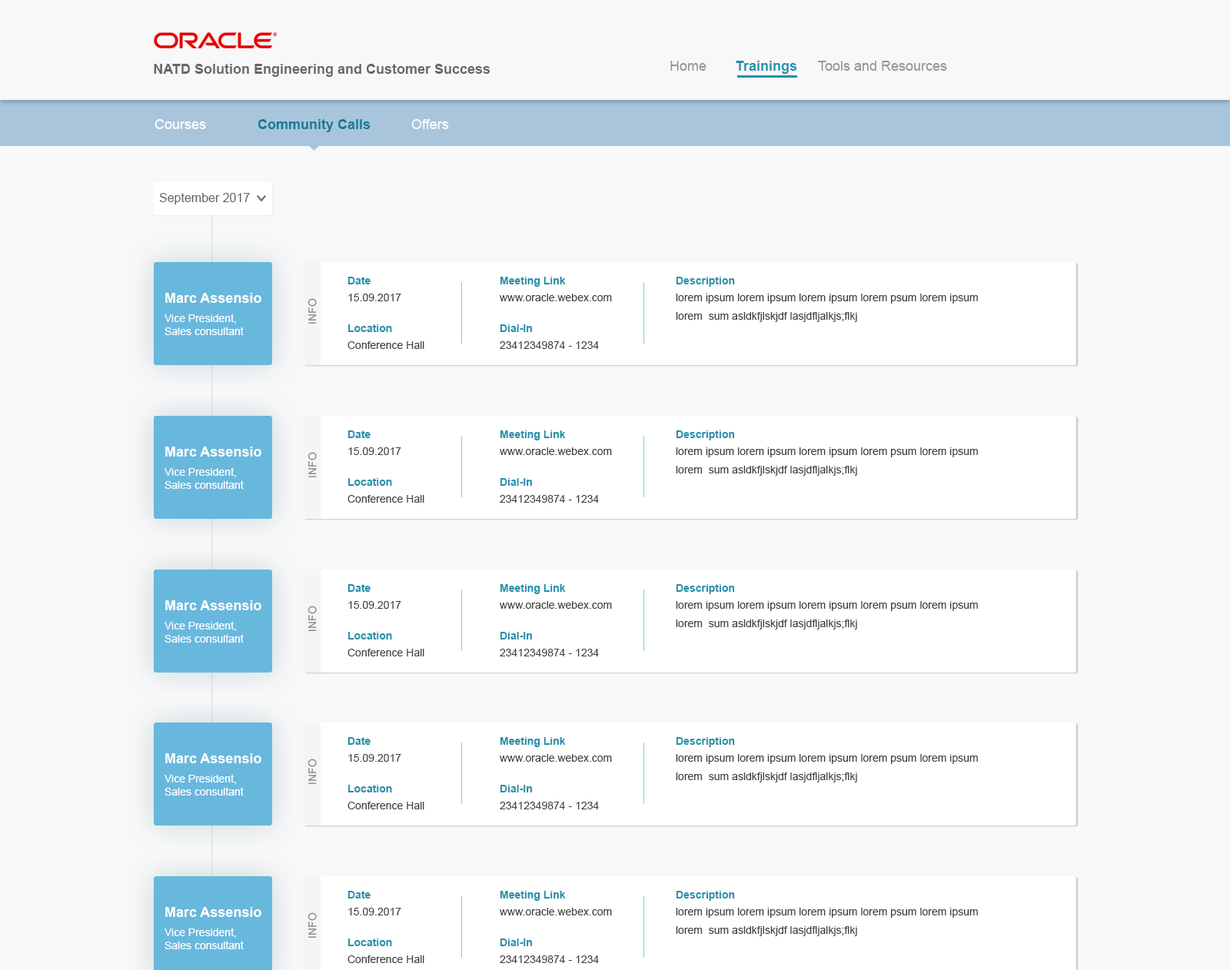
<style>
.page{position:relative;width:1230px;height:970px;background:#f8f8f8}
.page>*{position:absolute;margin:0}
.t1{font:13.8px "Arial-BoldMT";color:#666666}
.t2{font:13.8px "ArialMT";color:#969696}
.t3{font:13.8px "Arial-BoldMT";color:#2290ab}
.t4{font:13.8px "ArialMT";color:#ffffff}
.t5{font:13.8px "Arial-BoldMT";color:#00758f}
.t6{font:12.3px "ArialMT";color:#636363}
.t7{font:10.8px "Arial-BoldMT";color:#2290ab}
.t8{font:13.8px "Arial-BoldMT";color:#ffffff}
.t9{font:10.8px "ArialMT";color:#404040}
.t10{font:10.8px/18.4px "ArialMT";color:#404040}
.t11{font:10.8px "ArialMT";color:#868686}
.t12{font:10.8px "ArialMT";color:#ffffff}
</style>
<div class="page">
<p class="t1" style="left:154px;top:64px;width:336px;height:13px">NATD Solution Engineering and Customer Success</p>
<p class="t2" style="left:670px;top:61px;width:36px;height:10px">Home</p>
<p class="t3" style="left:735px;top:61px;width:62px;height:13px">Trainings</p>
<p class="t2" style="left:818px;top:61px;width:129px;height:10px">Tools and Resources</p>
<p class="t4" style="left:154px;top:119px;width:52px;height:10px">Courses</p>
<p class="t5" style="left:257px;top:119px;width:113px;height:13px;opacity:0.95">Community Calls</p>
<p class="t4" style="left:411px;top:119px;width:38px;height:10px;opacity:0.95">Offers</p>
<p class="t6" style="left:159px;top:193px;width:91px;height:11px">September 2017</p>
<p class="t7" style="left:347px;top:277px;width:23px;height:7px">Date</p>
<p class="t7" style="left:500px;top:277px;width:66px;height:10px">Meeting Link</p>
<p class="t7" style="left:675px;top:277px;width:60px;height:10px">Description</p>
<p class="t8" style="left:165px;top:293px;width:96px;height:10px">Marc Assensio</p>
<p class="t9" style="left:348px;top:294px;width:53px;height:7px">15.09.2017</p>
<p class="t9" style="left:500px;top:294px;width:112px;height:7px">www.oracle.webex.com</p>
<p class="t10" style="left:675px;top:294px;width:302px;height:28px">lorem ipsum lorem ipsum lorem ipsum lorem psum lorem ipsum<br>lorem  sum asldkfjlskjdf lasjdfljalkjs;flkj</p>
<p class="t11" style="left:307px;top:298px;width:10px;height:26px;rotate:-90deg">INFO</p>
<p class="t12" style="left:164px;top:314px;width:80px;height:21px">Vice President,<br>Sales consultant</p>
<p class="t7" style="left:348px;top:324px;width:44px;height:8px">Location</p>
<p class="t7" style="left:500px;top:324px;width:32px;height:8px">Dial-In</p>
<p class="t9" style="left:347px;top:341px;width:77px;height:8px">Conference Hall</p>
<p class="t9" style="left:500px;top:341px;width:99px;height:8px">23412349874 - 1234</p>
<p class="t7" style="left:347px;top:430px;width:23px;height:8px">Date</p>
<p class="t7" style="left:500px;top:430px;width:66px;height:10px">Meeting Link</p>
<p class="t7" style="left:675px;top:430px;width:60px;height:10px">Description</p>
<p class="t8" style="left:165px;top:446px;width:96px;height:10px">Marc Assensio</p>
<p class="t9" style="left:348px;top:447px;width:53px;height:8px">15.09.2017</p>
<p class="t9" style="left:500px;top:447px;width:112px;height:8px">www.oracle.webex.com</p>
<p class="t10" style="left:675px;top:447px;width:302px;height:29px">lorem ipsum lorem ipsum lorem ipsum lorem psum lorem ipsum<br>lorem  sum asldkfjlskjdf lasjdfljalkjs;flkj</p>
<p class="t11" style="left:307px;top:452px;width:10px;height:25px;rotate:-90deg">INFO</p>
<p class="t12" style="left:164px;top:467px;width:80px;height:22px">Vice President,<br>Sales consultant</p>
<p class="t7" style="left:348px;top:478px;width:44px;height:8px">Location</p>
<p class="t7" style="left:500px;top:478px;width:32px;height:8px">Dial-In</p>
<p class="t9" style="left:347px;top:495px;width:77px;height:8px">Conference Hall</p>
<p class="t9" style="left:500px;top:495px;width:99px;height:8px">23412349874 - 1234</p>
<p class="t7" style="left:347px;top:584px;width:23px;height:8px">Date</p>
<p class="t7" style="left:500px;top:584px;width:66px;height:10px">Meeting Link</p>
<p class="t7" style="left:675px;top:584px;width:60px;height:10px">Description</p>
<p class="t8" style="left:165px;top:600px;width:96px;height:10px">Marc Assensio</p>
<p class="t11" style="left:307px;top:606px;width:10px;height:25px;rotate:-90deg">INFO</p>
<p class="t9" style="left:348px;top:601px;width:53px;height:8px">15.09.2017</p>
<p class="t9" style="left:500px;top:601px;width:112px;height:8px">www.oracle.webex.com</p>
<p class="t10" style="left:675px;top:601px;width:302px;height:28px">lorem ipsum lorem ipsum lorem ipsum lorem psum lorem ipsum<br>lorem  sum asldkfjlskjdf lasjdfljalkjs;flkj</p>
<p class="t12" style="left:164px;top:621px;width:80px;height:21px">Vice President,<br>Sales consultant</p>
<p class="t7" style="left:348px;top:632px;width:44px;height:7px">Location</p>
<p class="t7" style="left:500px;top:632px;width:32px;height:7px">Dial-In</p>
<p class="t9" style="left:347px;top:649px;width:77px;height:7px">Conference Hall</p>
<p class="t9" style="left:500px;top:649px;width:99px;height:7px">23412349874 - 1234</p>
<p class="t7" style="left:347px;top:737px;width:23px;height:8px">Date</p>
<p class="t7" style="left:500px;top:737px;width:66px;height:10px">Meeting Link</p>
<p class="t7" style="left:675px;top:737px;width:60px;height:10px">Description</p>
<p class="t8" style="left:165px;top:753px;width:96px;height:10px">Marc Assensio</p>
<p class="t11" style="left:307px;top:758px;width:10px;height:26px;rotate:-90deg">INFO</p>
<p class="t9" style="left:348px;top:754px;width:53px;height:8px">15.09.2017</p>
<p class="t9" style="left:500px;top:754px;width:112px;height:8px">www.oracle.webex.com</p>
<p class="t10" style="left:675px;top:754px;width:302px;height:28px">lorem ipsum lorem ipsum lorem ipsum lorem psum lorem ipsum<br>lorem  sum asldkfjlskjdf lasjdfljalkjs;flkj</p>
<p class="t12" style="left:164px;top:774px;width:80px;height:21px">Vice President,<br>Sales consultant</p>
<p class="t7" style="left:348px;top:785px;width:44px;height:7px">Location</p>
<p class="t7" style="left:500px;top:785px;width:32px;height:7px">Dial-In</p>
<p class="t9" style="left:347px;top:802px;width:77px;height:7px">Conference Hall</p>
<p class="t9" style="left:500px;top:802px;width:99px;height:7px">23412349874 - 1234</p>
<p class="t7" style="left:347px;top:891px;width:23px;height:7px">Date</p>
<p class="t7" style="left:500px;top:891px;width:66px;height:10px">Meeting Link</p>
<p class="t7" style="left:675px;top:891px;width:60px;height:10px">Description</p>
<p class="t8" style="left:165px;top:907px;width:96px;height:10px">Marc Assensio</p>
<p class="t11" style="left:307px;top:912px;width:10px;height:26px;rotate:-90deg">INFO</p>
<p class="t9" style="left:348px;top:908px;width:53px;height:7px">15.09.2017</p>
<p class="t9" style="left:500px;top:908px;width:112px;height:7px">www.oracle.webex.com</p>
<p class="t10" style="left:675px;top:908px;width:302px;height:28px">lorem ipsum lorem ipsum lorem ipsum lorem psum lorem ipsum<br>lorem  sum asldkfjlskjdf lasjdfljalkjs;flkj</p>
<p class="t12" style="left:164px;top:928px;width:80px;height:21px">Vice President,<br>Sales consultant</p>
<p class="t7" style="left:348px;top:938px;width:44px;height:8px">Location</p>
<p class="t7" style="left:500px;top:938px;width:32px;height:8px">Dial-In</p>
<p class="t9" style="left:347px;top:955px;width:77px;height:8px">Conference Hall</p>
<p class="t9" style="left:500px;top:955px;width:99px;height:8px">23412349874 - 1234</p>
</div>
